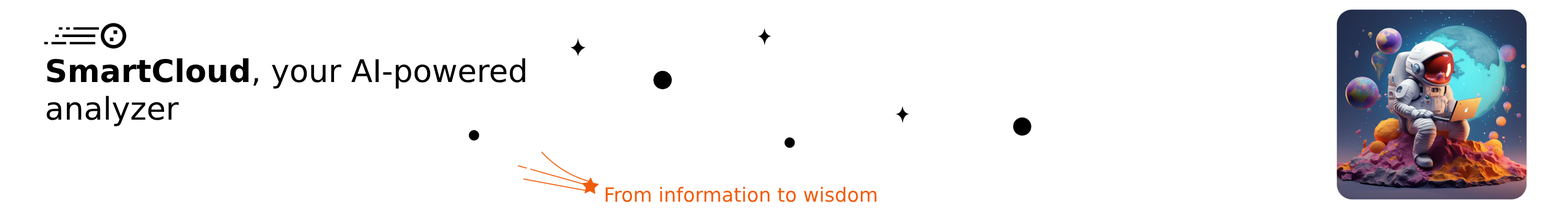
<style>
.page{position:relative;width:1568px;height:209px;background:#ffffff}
.page>*{position:absolute;margin:0}
.t1{font:31.2px "DejaVuSans";color:#000000}
.t2{font:31.2px "DejaVuSans-Bold";color:#000000}
.t3{font:19.5px "DejaVuSans";color:#f15c0b}
</style>
<div class="page">
<p class="t1" style="left:47px;top:58px;width:478px;height:68px"><span class="t2">SmartCloud</span>, your AI-powered <br>analyzer</p>
<p class="t3" style="left:605px;top:187px;width:272px;height:15px">From information to wisdom</p>
</div>
